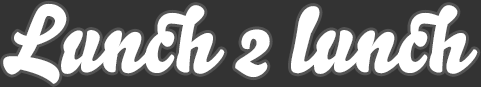
<style>
.page{position:relative;width:481px;height:87px;background:#333333}
.page>*{position:absolute;margin:0}
.t1{font:90px "Bello-Pro";color:#ffffff}
</style>
<div class="page">
<p class="t1" style="left:3px;top:3px;width:475px;height:81px">Lunch 2 lunch</p>
</div>
